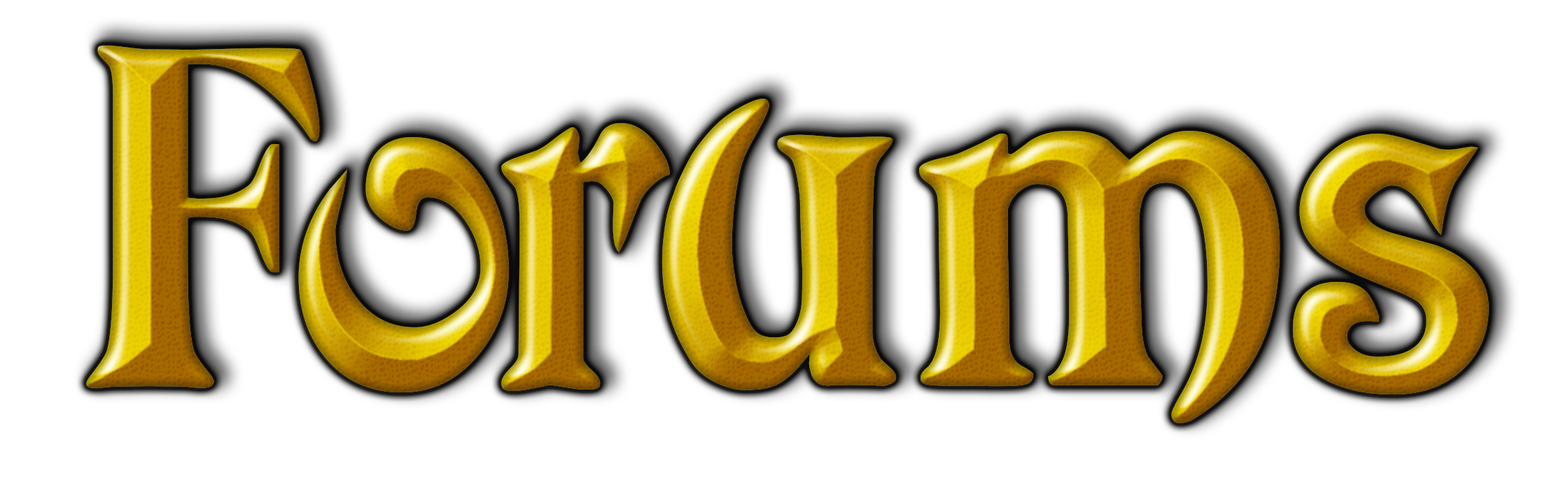
<style>
.page{position:relative;width:1568px;height:498px;background:#ffffff}
.page>*{position:absolute;margin:0}
.t1{font:472.2px "Avatar";letter-spacing:-0.07em}
.t2{font:472.2px "Avatar";letter-spacing:-0.03em}
.t3{font:472.2px "Avatar";letter-spacing:0.05em}
.t4{font:472.2px "Avatar";letter-spacing:0.01em}
</style>
<div class="page">
<p class="t1" style="left:86px;top:46px;width:1403px;height:378px">Fo<span class="t2">r</span><span class="t3">u</span><span class="t4">ms</span></p>
<p class="t1" style="left:86px;top:46px;width:1403px;height:378px">Fo<span class="t2">r</span><span class="t3">u</span><span class="t4">ms</span></p>
</div>
